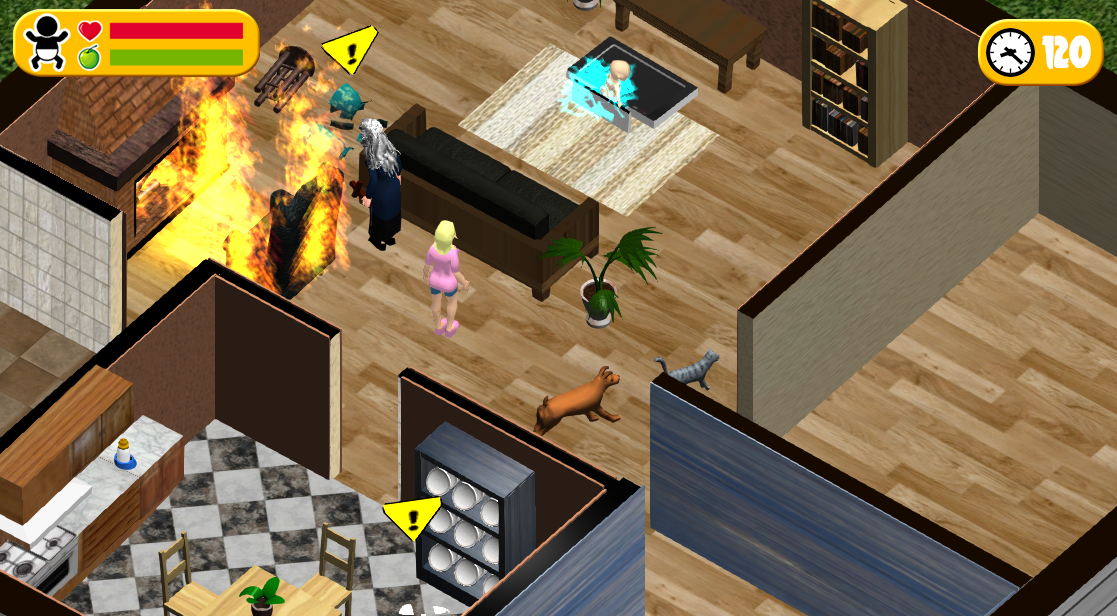
<style>
.page{position:relative;width:1117px;height:616px}
.page>*{position:absolute;margin:0}
.t1{font:46.7px "Mrs.Monster";color:#ffffff;font-weight:bold;scale:0.81 1}
</style>
<div class="page">
<p class="t1" style="left:1042px;top:35px;width:49px;height:34px">120</p>
</div>
